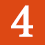
<style>
.page{position:relative;width:45px;height:45px;background:#dd4814}
.page>*{position:absolute;margin:0}
.t1{font:48px "MinionPro-Regular";color:#ffffff;text-transform:uppercase;font-weight:bold}
</style>
<div class="page">
<p class="t1" style="left:11px;top:5px;width:22px;height:32px">4</p>
</div>
